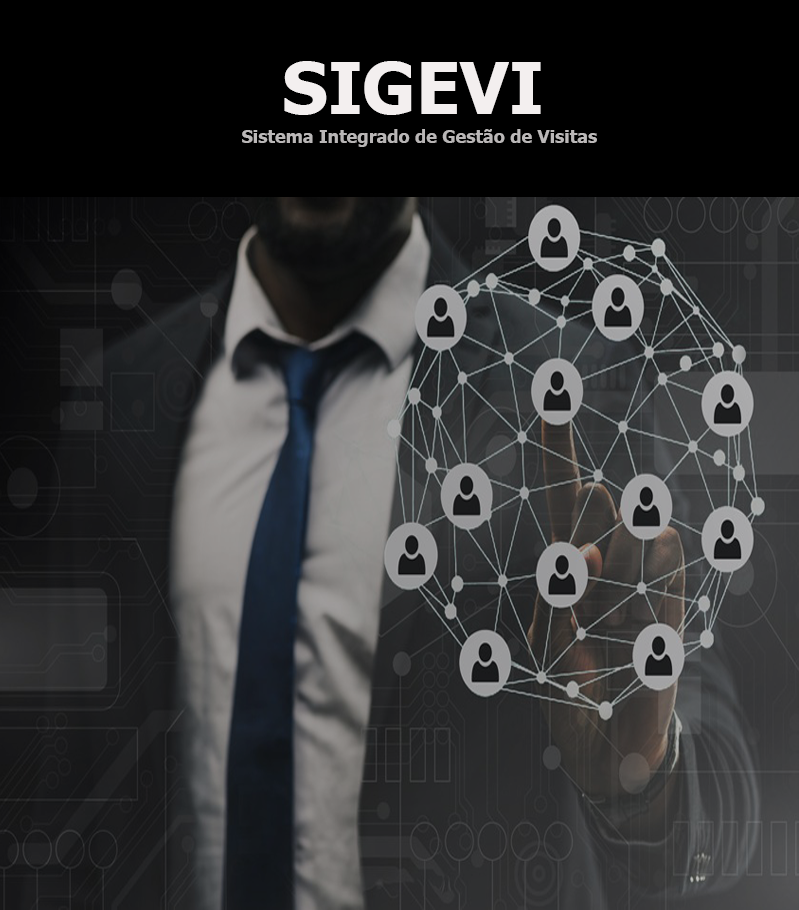
<style>
.page{position:relative;width:799px;height:910px;background:#000000}
.page>*{position:absolute;margin:0}
.t1{font:72px "Tahoma-Bold";color:#f3efef}
.t2{font:18px "Tahoma-Bold";color:#bab7b7}
</style>
<div class="page">
<p class="t1" style="left:284px;top:61px;width:257px;height:54px">SIGEVI</p>
<p class="t2" style="left:242px;top:129px;width:355px;height:18px">Sistema Integrado de Gestão de Visitas</p>
</div>
